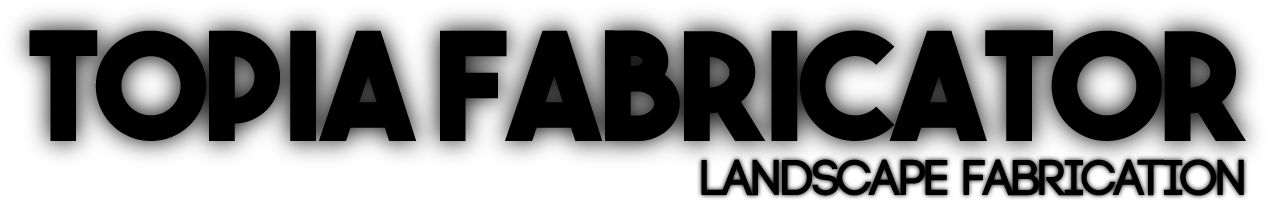
<style>
.page{position:relative;width:1271px;height:220px;background:#000000}
.page>*{position:absolute;margin:0}
.t1{font:150px "TheBoldFont";letter-spacing:-0.03em;color:#000000}
.t2{font:50px "Code-Bold";letter-spacing:-0.03em;color:#000000}
</style>
<div class="page">
<p class="t1" style="left:29px;top:30px;width:1217px;height:111px">TOPIA FABRICATOR</p>
<p class="t2" style="left:701px;top:159px;width:543px;height:37px">Landscape Fabrication</p>
</div>
